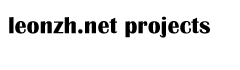
<style>
.page{position:relative;width:240px;height:70px;background:#ffffff}
.page>*{position:absolute;margin:0}
.t1{font:24px "BritannicBold";color:#000000}
</style>
<div class="page">
<p class="t1" style="left:9px;top:16px;width:201px;height:22px">leonzh.net projects</p>
</div>
